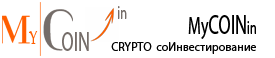
<style>
.page{position:relative;width:275px;height:58px;background:#ffffff}
.page>*{position:absolute;margin:0}
.t1{font:18px "MyriadPro-Regular";color:#756d69;scale:0.67 1}
.t2{font:27px "MyriadPro-Regular";color:#000000;scale:0.67 1}
.t3{font:24px "MyriadPro-Regular";color:#000000;scale:0.67 1}
.t4{font:18px "MyriadPro-Regular";color:#000000;scale:0.67 1}
.t5{font:18px "PalatinoLinotype-Roman";color:#ff5e00;scale:0.67 1}
.t6{font:27px "MyriadPro-Regular";color:#756d69;scale:0.67 1}
.t7{font:12px "MyriadPro-Regular";color:#040404}
</style>
<div class="page">
<p class="t1" style="left:118px;top:6px;width:9px;height:13px">in</p>
<p class="t2" style="left:188px;top:15px;width:68px;height:24px"><span class="t3">My</span>COIN<span class="t4">in</span></p>
<p class="t5" style="left:29px;top:31px;width:9px;height:13px">Y</p>
<p class="t6" style="left:62px;top:32px;width:27px;height:19px">OIN</p>
<p class="t7" style="left:111px;top:42px;width:145px;height:12px">CRYPTO  соИнвестирование</p>
</div>
